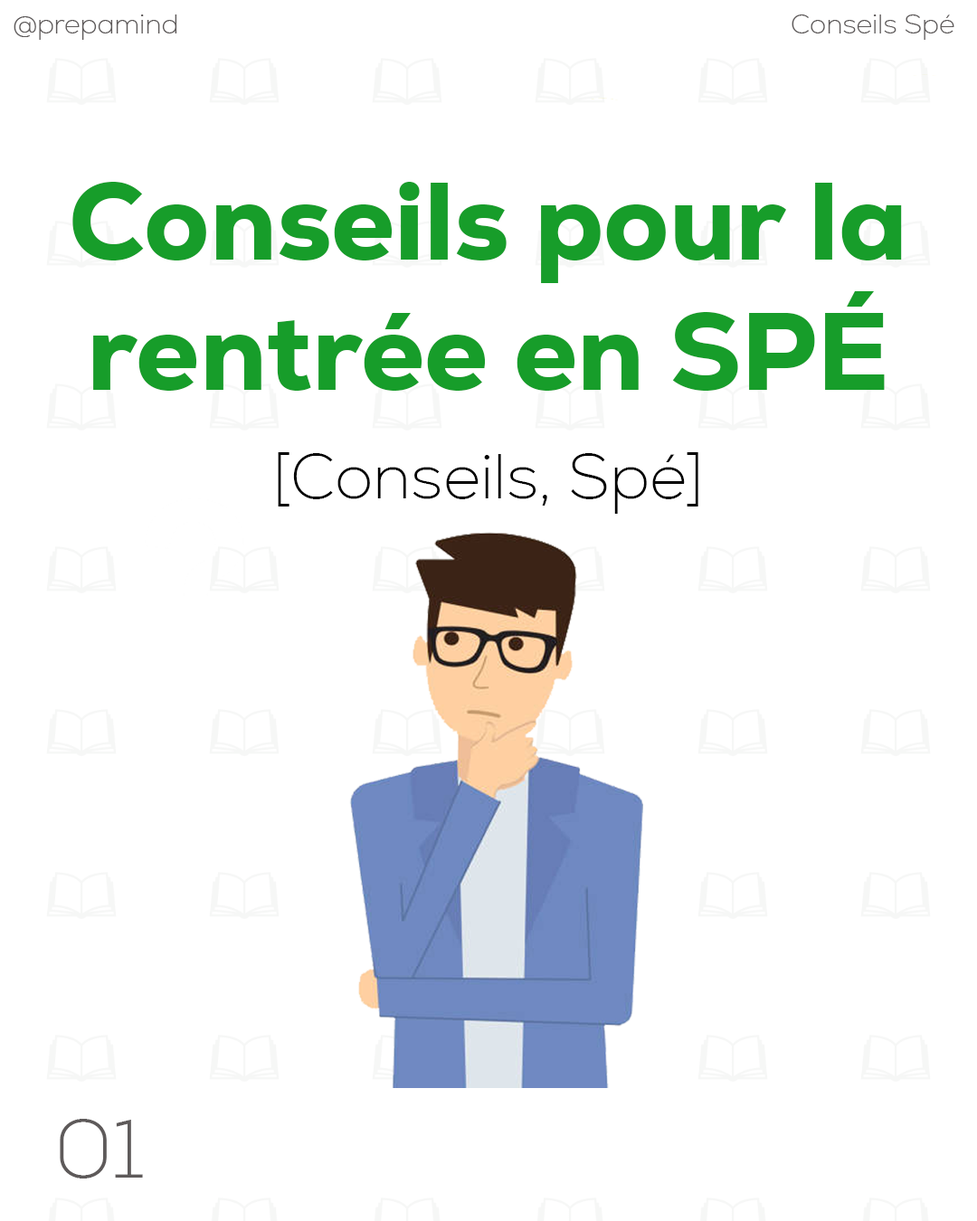
<style>
.page{position:relative;width:977px;height:1221px;background:#ffffff}
.page>*{position:absolute;margin:0}
.t1{font:27.1px "Nexa-ExtraLight";color:#5e5a5a}
.t2{font:108.5px "Nexa-Heavy";color:#179d2a}
.t3{font:63.3px "Nexa-ExtraLight";color:#000000}
.t4{font:81.7px "Nexa-ExtraLight";color:#5e5a5a}
</style>
<div class="page">
<p class="t1" style="left:14px;top:14px;width:163px;height:26px">@prepamind</p>
<p class="t1" style="left:791px;top:14px;width:163px;height:26px">Conseils Spé</p>
<p class="t2" style="left:72px;top:182px;width:830px;height:332px;text-align:center">Conseils pour la rentrée en SPÉ<br><br><br><br><span class="t3">[Conseils, Spé]</span></p>
<p class="t4" style="left:60px;top:1119px;width:83px;height:59px">01</p>
</div>
